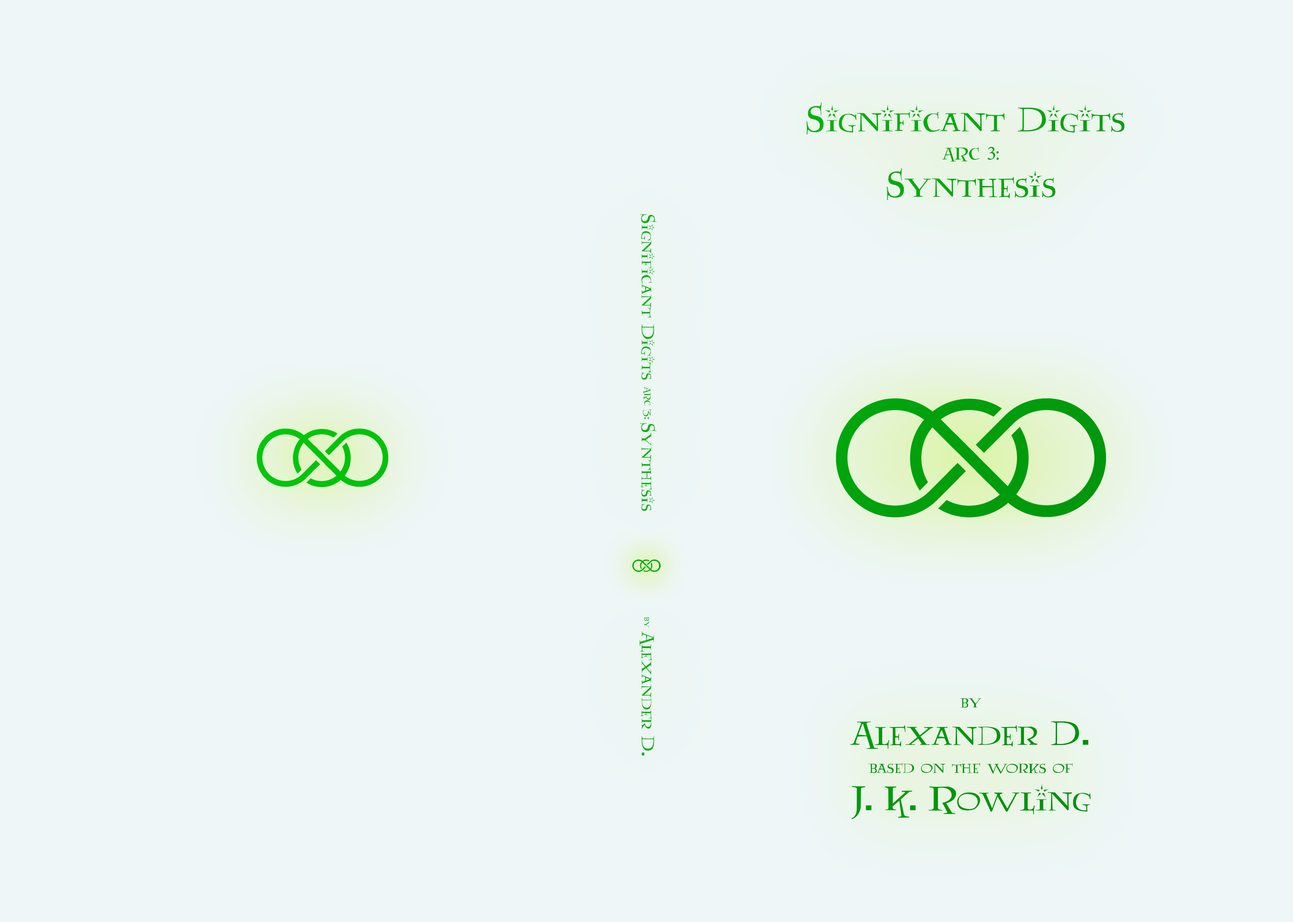
<style>
.page{position:relative;width:1293px;height:922px;background:#eef6f8}
.page>*{position:absolute;margin:0}
.t1{font:39.9px/37.3px "Lumos";color:#00a80c}
.t2{font:19.9px/28.1px "Lumos";color:#00a80c}
.t3{font:19.9px/28.1px "MinionPro-Regular";color:#00a80c}
.t4{font:20.7px "Lumos";color:#00b20b}
.t5{font:10.2px "Lumos";color:#00b20b}
.t6{font:20.7px "Lumos";color:#00af0c}
.t7{font:10.2px "Lumos";color:#00af0c}
.t8{font:19.9px/28.1px "Lumos";color:#00960c}
.t9{font:19.9px/511px "Lumos";color:#00960c}
.t10{font:39.9px/37.3px "Lumos";color:#00960c}
</style>
<div class="page">
<p class="t1" style="left:807px;top:102px;width:318px;height:98px;text-align:center">Significant Digits <br><span class="t2">ARC </span><span class="t3">3:<br></span>Synthesis</p>
<p class="t4" style="left:640px;top:214px;width:17px;height:297px;rotate:90deg">Significant Digits <span class="t5">ARC 3: </span>Synthesis</p>
<p class="t6" style="left:640px;top:616px;width:14px;height:139px;rotate:90deg"><span class="t7">by </span>Alexander D.</p>
<p class="t8" style="left:850px;top:698px;width:241px;height:121px;text-align:center"><span class="t9">by<br></span><span class="t10">Alexander D.<br></span>based on the works of<br><span class="t10">J. K. Rowling</span></p>
</div>
